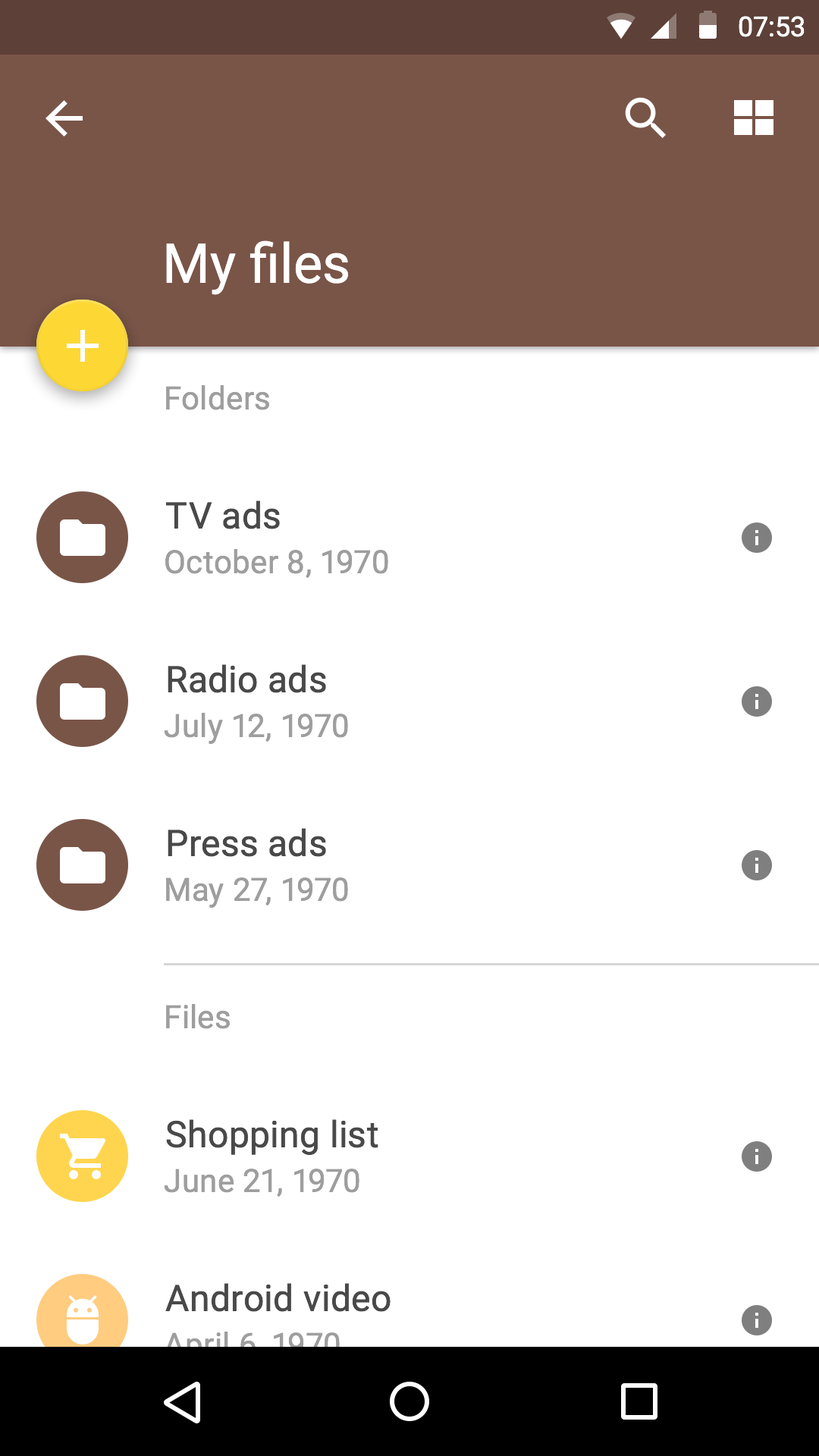
<style>
.page{position:relative;width:819px;height:1456px;background:#ffffff}
.page>*{position:absolute;margin:0}
.t1{font:27.3px "Roboto-Regular";color:#ffffff}
.t2{font:54.6px "Roboto-Regular";color:#ffffff}
.t3{font:31.8px "Roboto-Regular";letter-spacing:0.01em;color:#9e9e9e}
.t4{font:36.4px "Roboto-Regular";letter-spacing:0.01em;color:#494949}
</style>
<div class="page">
<p class="t1" style="left:739px;top:16px;width:66px;height:21px">07:53</p>
<p class="t2" style="left:166px;top:240px;width:182px;height:55px">My files</p>
<p class="t3" style="left:166px;top:384px;width:103px;height:26px">Folders</p>
<p class="t4" style="left:165px;top:500px;width:115px;height:29px">TV ads</p>
<p class="t3" style="left:165px;top:548px;width:223px;height:30px">October 8, 1970</p>
<p class="t4" style="left:168px;top:664px;width:158px;height:29px">Radio ads</p>
<p class="t3" style="left:164px;top:712px;width:184px;height:32px">July 12, 1970</p>
<p class="t4" style="left:168px;top:828px;width:158px;height:29px">Press ads</p>
<p class="t3" style="left:166px;top:877px;width:182px;height:31px">May 27, 1970</p>
<p class="t3" style="left:166px;top:1003px;width:64px;height:26px">Files</p>
<p class="t4" style="left:166px;top:1119px;width:212px;height:36px">Shopping list</p>
<p class="t3" style="left:164px;top:1169px;width:195px;height:28px">June 21, 1970</p>
<p class="t4" style="left:165px;top:1283px;width:226px;height:29px">Android video</p>
</div>
